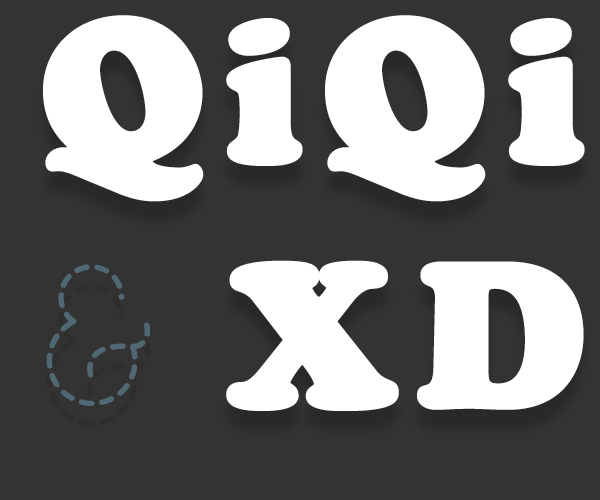
<style>
.page{position:relative;width:600px;height:500px;background:#333333}
.page>*{position:absolute;margin:0}
.t1{font:200px "CooperBlackStd";letter-spacing:0.08em;color:#ffffff;font-weight:bold}
</style>
<div class="page">
<p class="t1" style="left:43px;top:15px;width:542px;height:187px">QiQi</p>
<p class="t1" style="left:226px;top:260px;width:358px;height:151px">XD</p>
</div>
